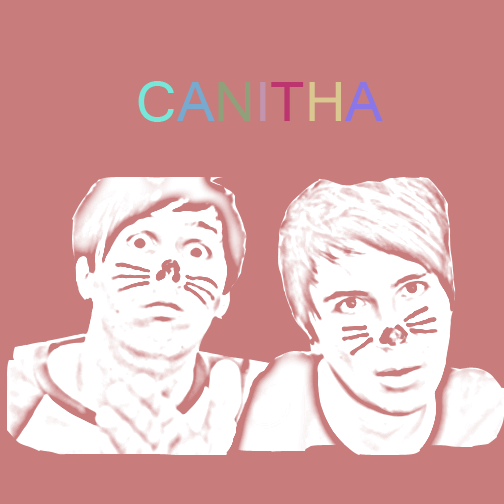
<style>
.page{position:relative;width:504px;height:504px;background:#c87c7c}
.page>*{position:absolute;margin:0}
.t1{font:72px "Tunga";color:#76e7d8}
.t2{font:72px "Tunga";color:#78a9ce}
.t3{font:72px "Tunga";color:#90a07a}
.t4{font:72px "Tunga";color:#c294ae}
.t5{font:72px "Tunga";color:#bd356e}
.t6{font:72px "Tunga";color:#dac890}
.t7{font:72px "Tunga";color:#8b76e7}
</style>
<div class="page">
<p class="t1" style="left:138px;top:81px;width:245px;height:41px">C<span class="t2">A</span><span class="t3">N</span><span class="t4">I</span><span class="t5">T</span><span class="t6">H</span><span class="t7">A</span></p>
</div>
